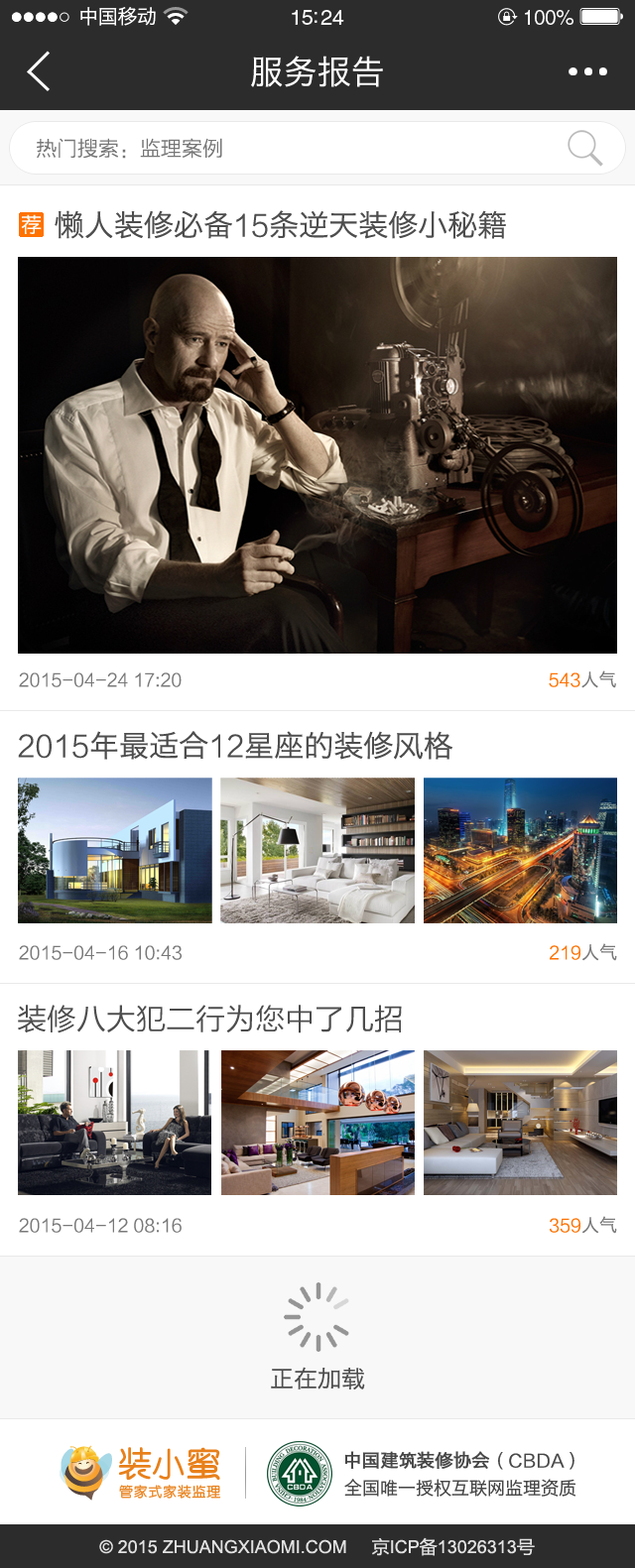
<style>
.page{position:relative;width:635px;height:1568px;background:#ffffff}
.page>*{position:absolute;margin:0}
.t1{font:19.8px "HiraginoSansGB-W3";letter-spacing:-0.02em;color:#ffffff}
.t2{font:21.3px "HelveticaLTStd-Roman";letter-spacing:-0.02em;color:#ffffff}
.t3{font:20.5px "HelveticaLTStd-Roman";letter-spacing:-0.02em;color:#ffffff}
.t4{font:33.7px "HiraginoSansGB-W3";color:#ffffff}
.t5{font:20.8px "FZLTXHK";color:#767676}
.t6{font:29.8px "HiraginoSansGB-W3";color:#4d4d4d}
.t7{font:29.8px "FZLTXHK";color:#4d4d4d}
.t8{font:17.9px "FZLTXHK";color:#797979}
.t9{font:17.9px "FZLTXHK";color:#fe7200}
.t10{font:17.9px "HiraginoSansGB-W3";color:#797979}
.t11{font:23.8px "HiraginoSansGB-W3";color:#4d4d4d}
.t12{font:17.9px "HiraginoSansGB-W3";color:#464646;font-weight:bold}
.t13{font:17.9px "FZLTXHK";color:#464646;font-weight:bold}
.t14{font:17.9px "HiraginoSansGB-W3";color:#464646}
.t15{font:17.9px "ArialMT";color:#e2e2e2}
.t16{font:17.9px "MicrosoftYaHei";color:#e2e2e2}
</style>
<div class="page">
<p class="t1" style="left:80px;top:7px;width:76px;height:19px">中国移动</p>
<p class="t2" style="left:292px;top:10px;width:52px;height:15px">15:24</p>
<p class="t3" style="left:525px;top:10px;width:48px;height:15px">100%</p>
<p class="t4" style="left:251px;top:56px;width:132px;height:31px">服务报告</p>
<p class="t5" style="left:37px;top:138px;width:185px;height:21px">热门搜索：监理案例</p>
<p class="t6" style="left:55px;top:210px;width:451px;height:29px">懒人装修必备<span class="t7">15</span>条逆天装修小秘籍</p>
<p class="t8" style="left:19px;top:670px;width:597px;height:18px">2015-04-24 17:20                                                                          <span class="t9">543</span><span class="t10">人气</span></p>
<p class="t6" style="left:18px;top:731px;width:434px;height:29px"><span class="t7">2015</span>年最适合<span class="t7">12</span>星座的装修风格</p>
<p class="t8" style="left:19px;top:943px;width:598px;height:18px">2015-04-16 10:43                                                                          <span class="t9">219</span><span class="t10">人气</span></p>
<p class="t7" style="left:18px;top:1005px;width:384px;height:28px">装修八大犯二行为您中了几招</p>
<p class="t8" style="left:19px;top:1216px;width:598px;height:18px">2015-04-12 08:16                                                                          <span class="t9">359</span><span class="t10">人气</span></p>
<p class="t11" style="left:271px;top:1367px;width:94px;height:22px">正在加载</p>
<p class="t12" style="left:344px;top:1451px;width:230px;height:19px">中国建筑装修协会<span class="t13">（CBDA）</span></p>
<p class="t14" style="left:344px;top:1479px;width:231px;height:18px">全国唯一授权互联网监理资质</p>
<p class="t15" style="left:99px;top:1537px;width:436px;height:19px">© 2015 ZHUANGXIAOMI.COM     <span class="t16">京</span>ICP<span class="t16">备</span>13026313<span class="t16">号</span></p>
</div>
